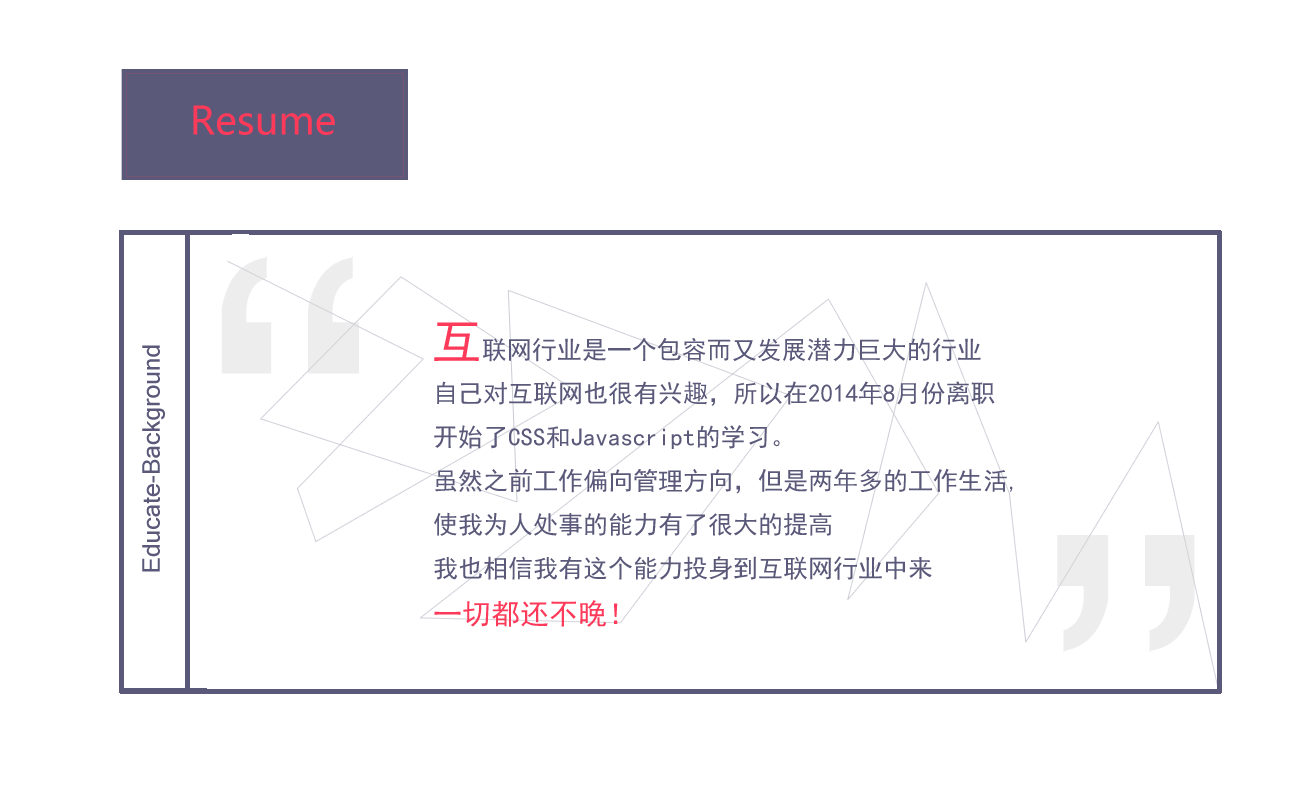
<style>
.page{position:relative;width:1300px;height:800px;background:#ffffff}
.page>*{position:absolute;margin:0}
.t1{font:38.5px "MicrosoftYaHei";color:#fe3a5a}
.t2{font:25px "SimHei";color:#5a5979}
.t3{font:50px "SimHei";color:#fe3a5a}
.t4{font:23.7px "Mangal";color:#5a5979}
.t5{font:29px "SimHei";color:#fe3a5a}
</style>
<div class="page">
<p class="t1" style="left:193px;top:105px;width:142px;height:30px">Resume</p>
<p class="t2" style="left:434px;top:322px;width:547px;height:40px"><span class="t3">互</span>联网行业是一个包容而又发展潜力巨大的行业</p>
<p class="t4" style="left:142px;top:345px;width:23px;height:227px;rotate:-90deg">Educate-Background</p>
<p class="t2" style="left:434px;top:381px;width:579px;height:246px">自己对互联网也很有兴趣，所以在2014年8月份离职<br>开始了CSS和Javascript的学习。<br>虽然之前工作偏向管理方向，但是两年多的工作生活,<br>使我为人处事的能力有了很大的提高<br>我也相信我有这个能力投身到互联网行业中来<br><span class="t5">一切都还不晚！</span></p>
</div>
